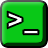
<style>
.page{position:relative;width:48px;height:48px;background:#09c817}
.page>*{position:absolute;margin:0}
.t1{font:34px "Roboto-Black"}
</style>
<div class="page">
<p class="t1" style="left:7px;top:11px;width:32px;height:24px">&gt;_</p>
</div>
